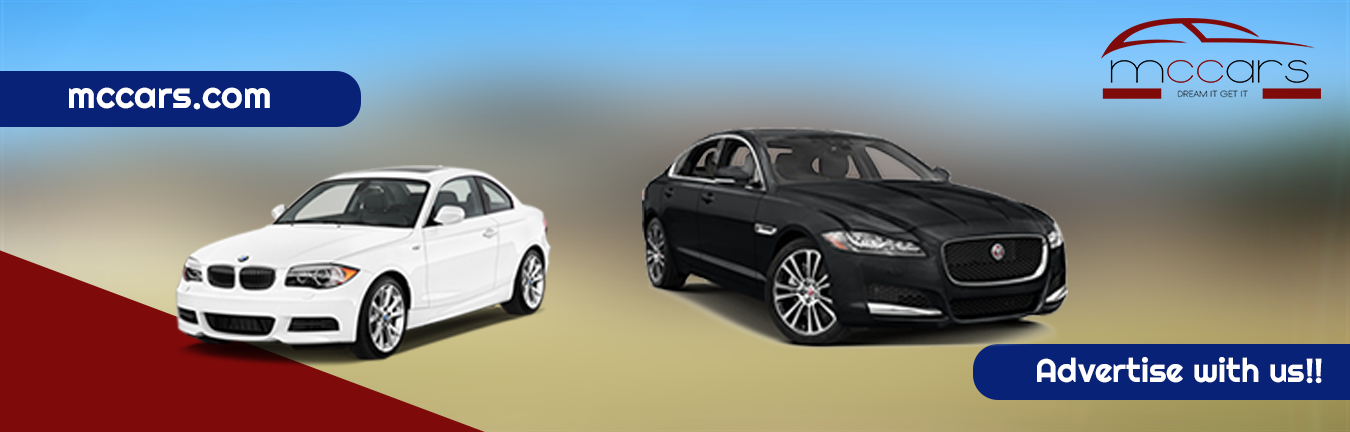
<style>
.page{position:relative;width:1350px;height:432px}
.page>*{position:absolute;margin:0}
.t1{font:37.5px "Righteous-Regular";color:#ffffff}
.t2{font:33.3px "Righteous-Regular";color:#ffffff}
</style>
<div class="page">
<p class="t1" style="left:69px;top:87px;width:201px;height:23px">mccars.com</p>
<p class="t2" style="left:1037px;top:357px;width:285px;height:27px">Advertise with us!!</p>
</div>
